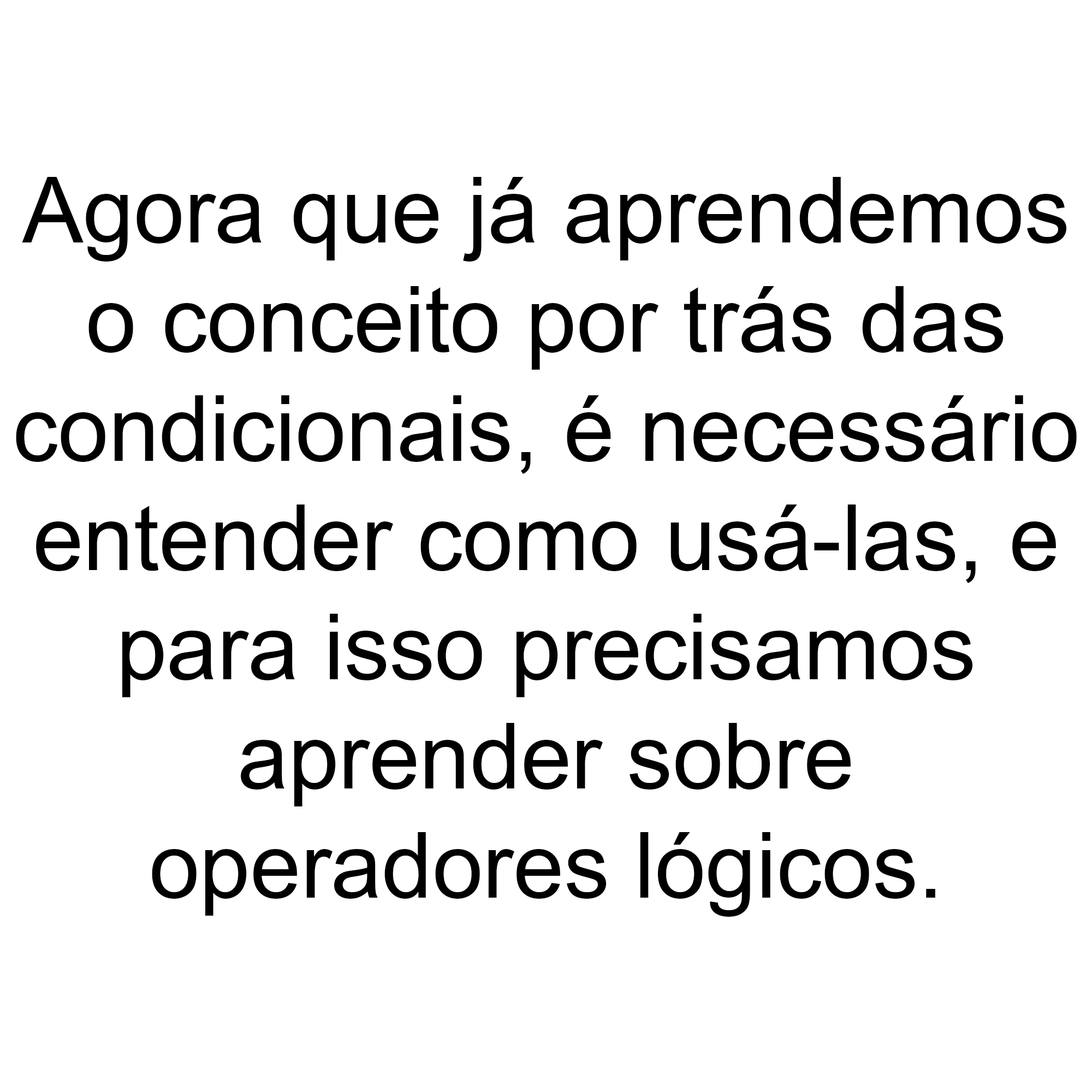
<style>
.page{position:relative;width:1092px;height:1092px;background:#ffffff}
.page>*{position:absolute;margin:0}
.t1{font:91px "ArialMT";color:#000000}
</style>
<div class="page">
<p class="t1" style="left:16px;top:177px;width:1061px;height:740px;text-align:center">Agora que já aprendemos<br>o conceito por trás das<br>condicionais, é necessário<br>entender como usá-las, e<br>para isso precisamos<br>aprender sobre<br>operadores lógicos.</p>
</div>
